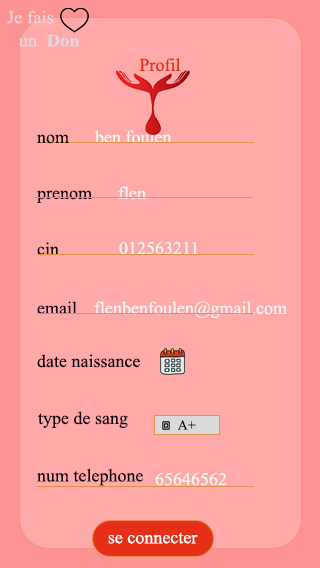
<style>
.page{position:relative;width:320px;height:568px;background:#ffa9a9}
.page>*{position:absolute;margin:0}
.t1{font:18px "TimesNewRomanPSMT";color:#e52f17}
.t2{font:18px "TimesNewRomanPSMT";color:#0c0109}
.t3{font:18px "TimesNewRomanPSMT";color:#f8f5f5}
.t4{font:14px "TimesNewRomanPSMT";color:#0c0109}
.t5{font:18px "TimesNewRomanPSMT";color:#ffffff}
.t6{font:14px "TimesNewRomanPSMT";color:#ffffff}
</style>
<div class="page">
<p class="t1" style="left:139px;top:58px;width:42px;height:14px">Profil</p>
<p class="t2" style="left:37px;top:134px;width:32px;height:10px">nom</p>
<p class="t3" style="left:94px;top:130px;width:78px;height:14px">ben foulen</p>
<p class="t2" style="left:37px;top:190px;width:55px;height:13px">prenom</p>
<p class="t3" style="left:118px;top:186px;width:28px;height:14px">flen</p>
<p class="t2" style="left:37px;top:242px;width:22px;height:14px">cin</p>
<p class="t3" style="left:119px;top:241px;width:79px;height:14px">012563211</p>
<p class="t2" style="left:37px;top:301px;width:40px;height:14px">email</p>
<p class="t3" style="left:94px;top:301px;width:193px;height:17px">flenbenfoulen@gmail.com</p>
<p class="t2" style="left:37px;top:354px;width:103px;height:14px">date naissance</p>
<p class="t2" style="left:38px;top:411px;width:90px;height:17px">type de sang</p>
<p class="t4" style="left:177px;top:420px;width:19px;height:10px">A+</p>
<p class="t2" style="left:37px;top:468px;width:106px;height:18px">num telephone</p>
<p class="t3" style="left:155px;top:472px;width:72px;height:14px">65646562</p>
<p class="t5" style="left:108px;top:532px;width:90px;height:12px"><span class="t6"><br></span>se connecter</p>
</div>
